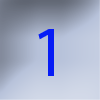
<style>
.page{position:relative;width:100px;height:100px}
.page>*{position:absolute;margin:0}
.t1{font:72px "MyriadPro-Regular";color:#061cf6}
</style>
<div class="page">
<p class="t1" style="left:38px;top:29px;width:16px;height:47px">1</p>
</div>
